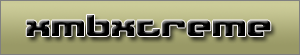
<style>
.page{position:relative;width:300px;height:55px}
.page>*{position:absolute;margin:0}
.t1{font:28px "Xeron";color:#000000}
</style>
<div class="page">
<p class="t1" style="left:26px;top:15px;width:245px;height:21px">xmbXtreme</p>
</div>
